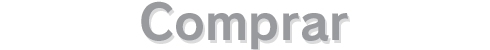
<style>
.page{position:relative;width:490px;height:50px;background:#ffffff}
.page>*{position:absolute;margin:0}
.t1{font:48px "RodinPro-B";color:#989a9d}
</style>
<div class="page">
<p class="t1" style="left:141px;top:1px;width:207px;height:49px">Comprar</p>
</div>
